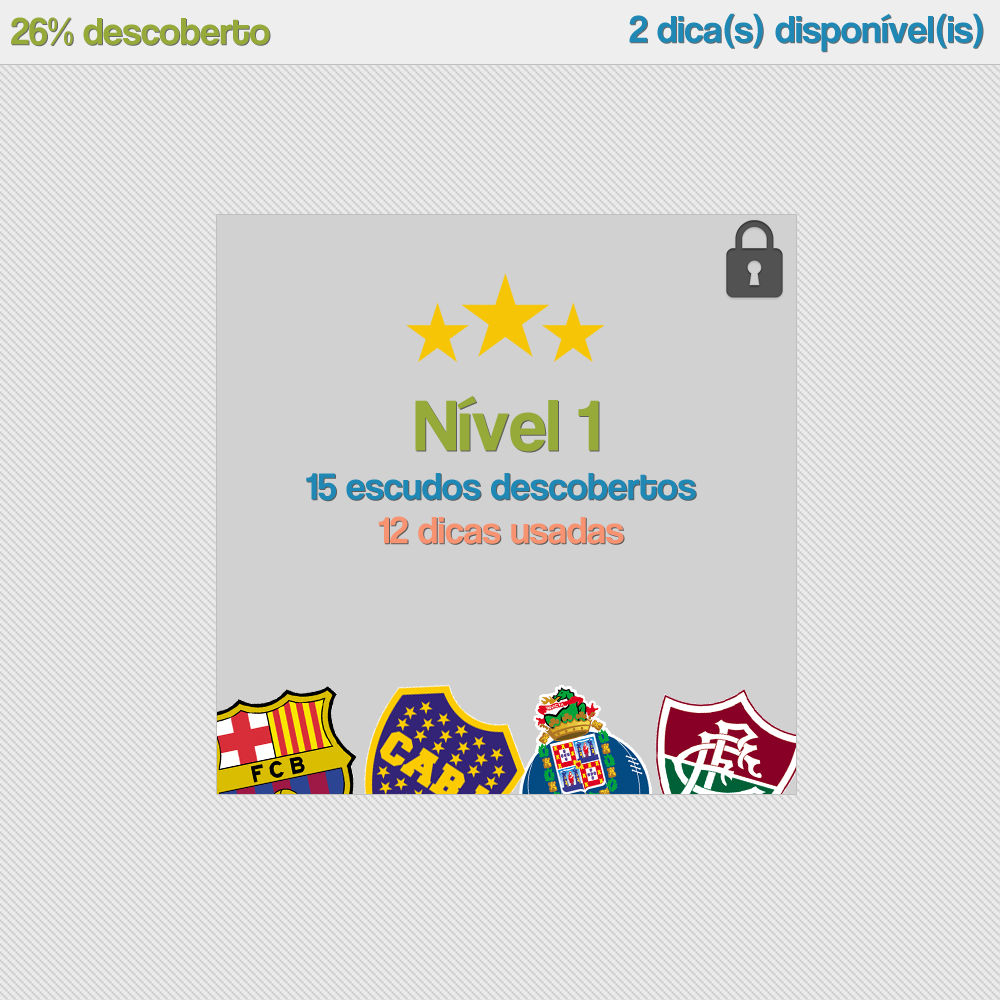
<style>
.page{position:relative;width:1000px;height:1000px;background:#d1d1d1}
.page>*{position:absolute;margin:0}
.t1{font:39px "CoolveticaRg-Regular";color:#96aa39}
.t2{font:39px "CoolveticaRg-Regular";color:#2088b5}
.t3{font:75px "CoolveticaRg-Regular";color:#96aa39}
.t4{font:39px "CoolveticaRg-Regular";color:#f79371}
</style>
<div class="page">
<p class="t1" style="left:11px;top:17px;width:259px;height:29px">26% descoberto</p>
<p class="t2" style="left:629px;top:13px;width:354px;height:39px">2 dica(s) disponível(is)</p>
<p class="t3" style="left:415px;top:395px;width:184px;height:57px">Nível 1</p>
<p class="t2" style="left:306px;top:473px;width:390px;height:28px">15 escudos descobertos</p>
<p class="t4" style="left:378px;top:516px;width:246px;height:28px">12 dicas usadas</p>
</div>
